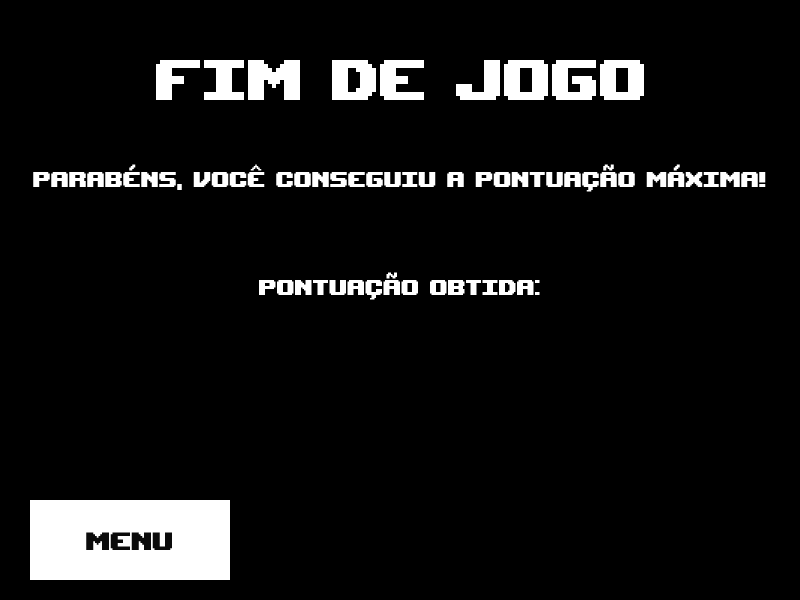
<style>
.page{position:relative;width:800px;height:600px;background:#000000}
.page>*{position:absolute;margin:0}
.t1{font:80px "UpheavalTT-BRK-";color:#ffffff}
.t2{font:30px "UpheavalTT-BRK-";color:#ffffff}
.t3{font:35px "UpheavalTT-BRK-";color:#0b0b0b}
</style>
<div class="page">
<p class="t1" style="left:156px;top:60px;width:488px;height:40px">FIM DE JOGO</p>
<p class="t2" style="left:33px;top:164px;width:733px;height:28px">PARABÉNS, VOCÊ CONSEGUIU A PONTUAÇÃO MÁXIMA!</p>
<p class="t2" style="left:259px;top:272px;width:281px;height:28px">PONTUAÇÃO OBTIDA:</p>
<p class="t3" style="left:86px;top:532px;width:86px;height:18px">MENU</p>
</div>
